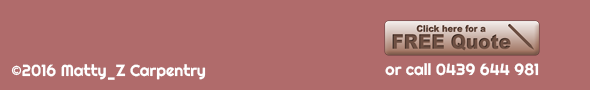
<style>
.page{position:relative;width:590px;height:90px;background:#b06b6b}
.page>*{position:absolute;margin:0}
.t1{font:16px "Righteous-Regular";color:#ffffff}
</style>
<div class="page">
<p class="t1" style="left:11px;top:64px;width:195px;height:16px">©2016 Matty_Z Carpentry</p>
<p class="t1" style="left:385px;top:63px;width:154px;height:13px">or call 0439 644 981</p>
</div>
